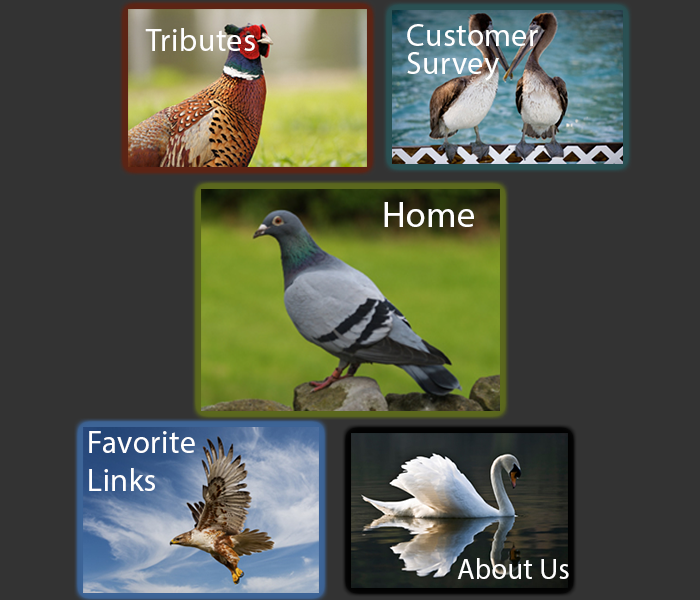
<style>
.page{position:relative;width:700px;height:600px;background:#333333}
.page>*{position:absolute;margin:0}
.t1{font:32px "MyriadPro-Regular";letter-spacing:0.01em;color:#fefefe}
.t2{font:32px/28px "MyriadPro-Regular";letter-spacing:0.01em;color:#ffffff}
.t3{font:35.9px "MyriadPro-Regular";letter-spacing:0.01em;color:#ffffff}
.t4{font:32px "MyriadPro-Regular";letter-spacing:0.01em;color:#ffffff}
.t5{font:29.4px "MyriadPro-Regular";letter-spacing:0.01em;color:#ffffff}
</style>
<div class="page">
<p class="t1" style="left:145px;top:28px;width:110px;height:23px">Tributes</p>
<p class="t2" style="left:407px;top:24px;width:131px;height:57px">Customer<br>Survey</p>
<p class="t3" style="left:384px;top:202px;width:90px;height:25px">Home</p>
<p class="t4" style="left:89px;top:431px;width:106px;height:60px">Favorite<br>Links</p>
<p class="t5" style="left:457px;top:558px;width:112px;height:21px">About Us</p>
</div>
